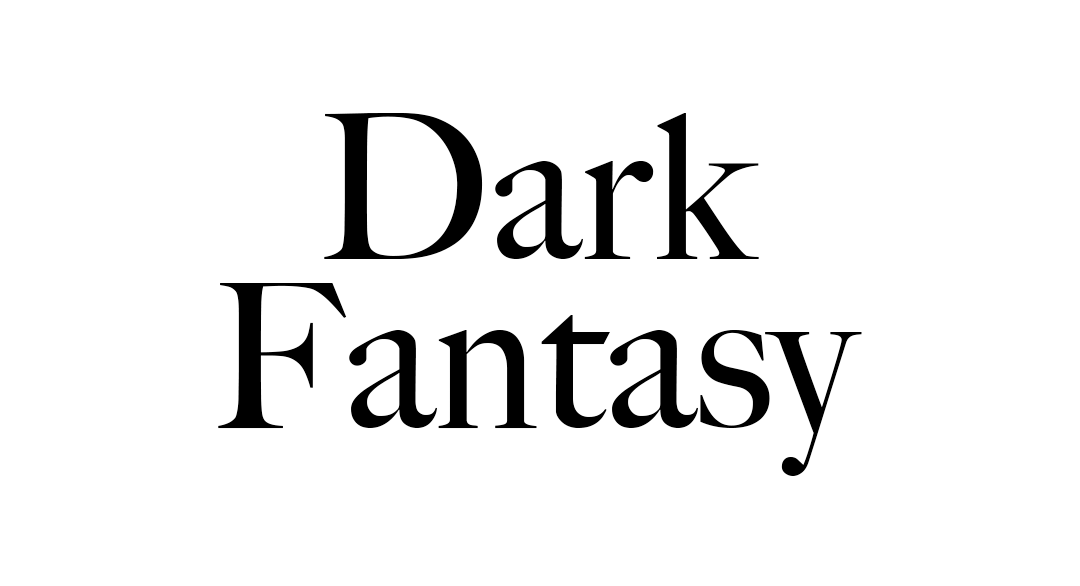
<style>
.page{position:relative;width:1080px;height:586px;background:#ffffff}
.page>*{position:absolute;margin:0}
.t1{font:202.5px/168.7px "BigCaslon-Medium";color:#000000}
</style>
<div class="page">
<p class="t1" style="left:218px;top:113px;width:644px;height:363px;text-align:center">Dark<br>Fantasy</p>
</div>
